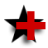
<style>
.page{position:relative;width:48px;height:48px;background:#ffffff}
.page>*{position:absolute;margin:0}
.t1{font:60px "CenturyGothic-Bold";letter-spacing:0.03em;color:#ce0000}
</style>
<div class="page">
<p class="t1" style="left:16px;top:11px;width:30px;height:29px">+</p>
</div>
